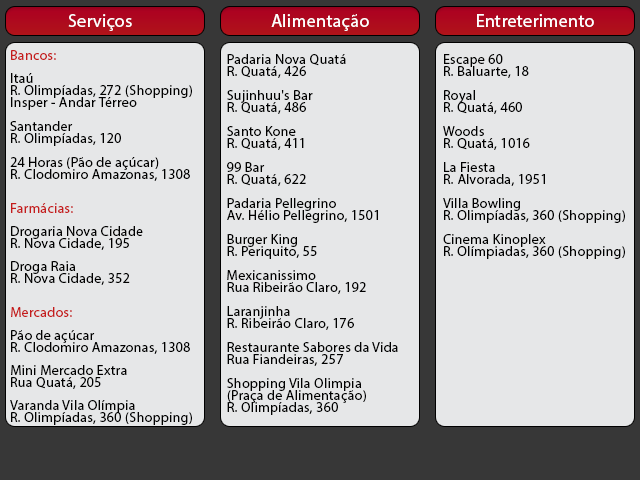
<style>
.page{position:relative;width:640px;height:480px;background:#e6e7e8}
.page>*{position:absolute;margin:0}
.t1{font:18px "MyriadPro-Regular";letter-spacing:0.02em;color:#ffffff}
.t2{font:14px/12px "MyriadPro-Regular";letter-spacing:0.02em;color:#000000}
.t3{font:14px/11px "MyriadPro-Regular";letter-spacing:0.02em;color:#c51c1c}
</style>
<div class="page">
<p class="t1" style="left:68px;top:14px;width:64px;height:17px">Serviços</p>
<p class="t1" style="left:271px;top:14px;width:98px;height:17px">Alimentação</p>
<p class="t1" style="left:477px;top:14px;width:117px;height:13px">Entreterimento</p>
<p class="t2" style="left:10px;top:50px;width:182px;height:375px"><span class="t3">Bancos:<br><br></span>Itaú<br>R. Olimpíadas, 272 (Shopping)<br>Insper - Andar Térreo<br><br>Santander<br>R. Olimpíadas, 120 <br><br>24 Horas (Pão de açúcar)<br>R. Clodomiro Amazonas, 1308<br><br><br><span class="t3">Farmácias:<br><br></span>Drogaria Nova Cidade<br>R. Nova Cidade, 195<br><br>Droga Raia<br>R. Nova Cidade, 352<br><br><br><span class="t3">Mercados:<br><br></span>Pão de açúcar<br>R. Clodomiro Amazonas, 1308<br><br>Mini Mercado Extra<br>Rua Quatá, 205<br><br>Varanda Vila Olímpia<br>R. Olimpíadas, 360 (Shopping)</p>
<p class="t2" style="left:227px;top:54px;width:171px;height:361px">Padaria Nova Quatá<br>R. Quatá, 426<br><br>Sujinhuu's Bar<br>R. Quatá, 486<br><br>Santo Kone<br>R. Quatá, 411<br><br>99 Bar<br>R. Quatá, 622<br><br>Padaria Pellegrino<br>Av. Hélio Pellegrino, 1501<br><br>Burger King<br>R. Periquito, 55<br><br>Mexicanissimo <br>Rua Ribeirão Claro, 192<br><br>Laranjinha<br>R. Ribeirão Claro, 176<br><br>Restaurante Sabores da Vida<br>Rua Fiandeiras, 257<br><br>Shopping Vila Olimpia<br>(Praça de Alimentação) <br>R. Olimpíadas, 360</p>
<p class="t2" style="left:443px;top:54px;width:182px;height:205px">Escape 60<br>R. Baluarte, 18<br><br>Royal<br>R. Quatá, 460 <br><br>Woods<br>R. Quatá, 1016<br><br>La Fiesta <br>R. Alvorada, 1951<br><br>Villa Bowling<br>R. Olimpíadas, 360 (Shopping)<br><br>Cinema Kinoplex<br>R. Olímpiadas, 360 (Shopping)</p>
</div>
